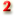
<style>
.page{position:relative;width:16px;height:16px}
.page>*{position:absolute;margin:0}
.t1{font:14px "CenturyGothic-Bold";font-weight:bold}
</style>
<div class="page">
<p class="t1" style="left:3px;top:0px;width:8px;height:12px">2</p>
</div>
